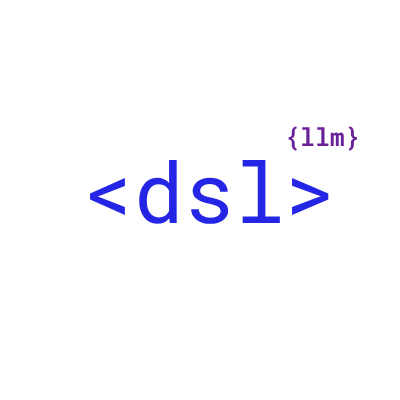
<style>
.page{position:relative;width:400px;height:400px;background:#ffffff}
.page>*{position:absolute;margin:0}
.t1{font:25px "RobotoMono-SemiBold";color:#6a2199}
.t2{font:84px "RobotoMono-Regular";color:#2525e5}
</style>
<div class="page">
<p class="t1" style="left:288px;top:126px;width:69px;height:25px">{llm}</p>
<p class="t2" style="left:90px;top:160px;width:239px;height:64px">&lt;dsl&gt;</p>
</div>
